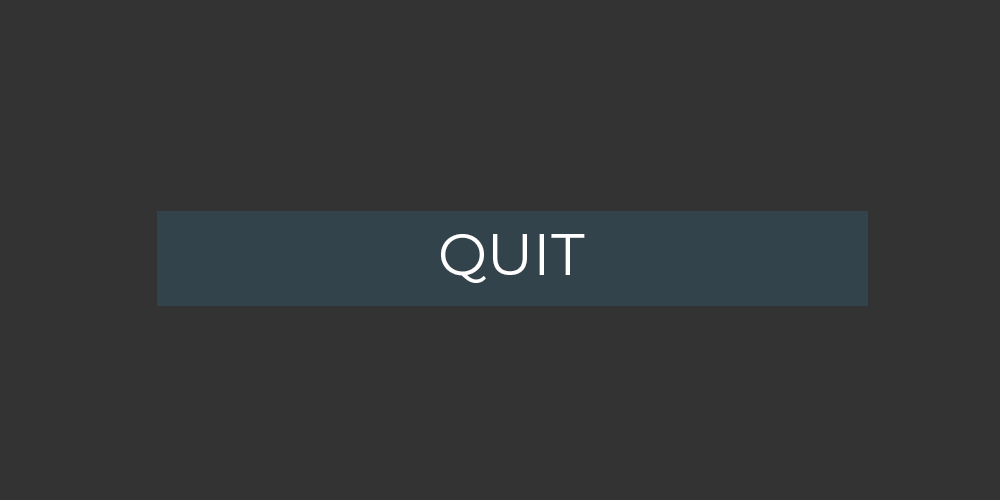
<style>
.page{position:relative;width:1000px;height:500px;background:#333333}
.page>*{position:absolute;margin:0}
.t1{font:58.3px "Montserrat-Regular";color:#ffffff}
</style>
<div class="page">
<p class="t1" style="left:441px;top:234px;width:144px;height:49px">QUIT</p>
</div>
